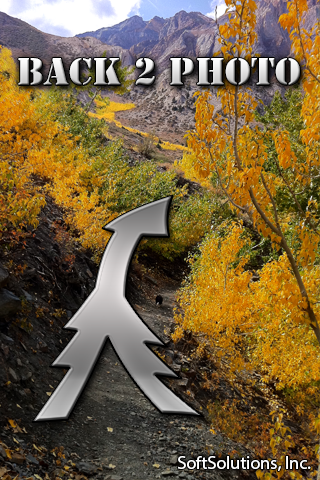
<style>
.page{position:relative;width:320px;height:480px}
.page>*{position:absolute;margin:0}
.t1{font:36px "StencilStd"}
.t2{font:18px "MyriadPro-Regular";color:#ffffff}
</style>
<div class="page">
<p class="t1" style="left:18px;top:58px;width:282px;height:27px">Back 2 Photo</p>
<p class="t2" style="left:178px;top:456px;width:133px;height:15px">SoftSolutions, Inc.</p>
</div>
